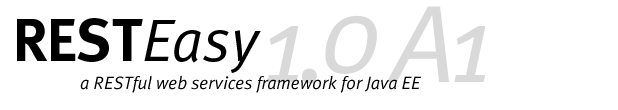
<style>
.page{position:relative;width:618px;height:110px;background:#ffffff}
.page>*{position:absolute;margin:0}
.t1{font:110px "MetaPlusNormal-Italic";letter-spacing:-0.06em;color:#d9d9d9}
.t2{font:60px "Meta-Bold";color:#000000}
.t3{font:60px "MetaPlusNormal-Italic";color:#000000}
.t4{font:18px "MetaPlusNormal-Italic";color:#000000}
</style>
<div class="page">
<p class="t1" style="left:267px;top:6px;width:219px;height:78px">1.0 A1</p>
<p class="t2" style="left:17px;top:18px;width:244px;height:55px">REST<span class="t3">Easy</span></p>
<p class="t4" style="left:80px;top:75px;width:342px;height:18px">a RESTful web services framework for Java EE</p>
</div>
